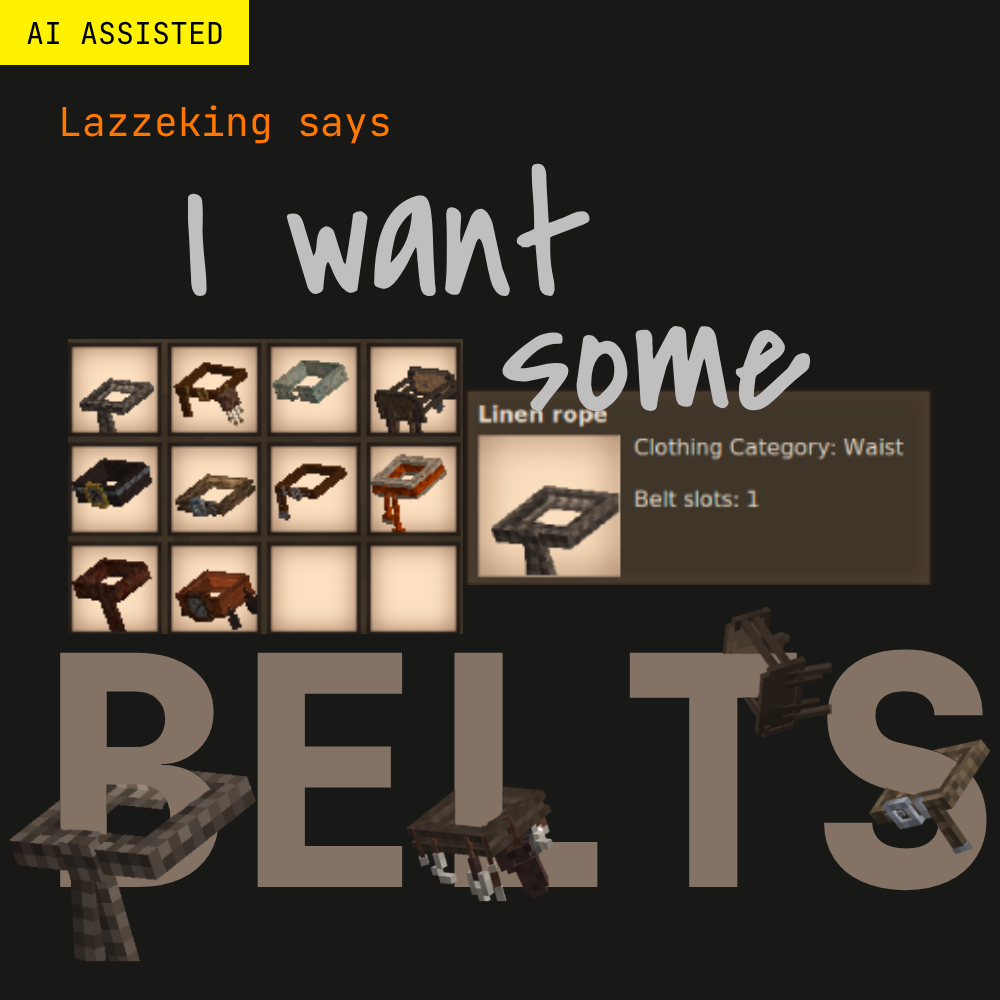
<style>
.page{position:relative;width:1000px;height:1000px;background:#181817}
.page>*{position:absolute;margin:0}
.t1{font:30px "JetBrainsMonoRoman-Regular";color:#000000}
.t2{font:39.7px "JetBrainsMonoRoman-Regular";color:#ff7700}
.t3{font:179.1px "CoveredByYourGrace";color:#bfbfbf}
.t4{font:321px "JetBrainsMonoRoman-ExtraBold";color:#847364}
</style>
<div class="page">
<p class="t1" style="left:27px;top:21px;width:195px;height:24px">AI ASSISTED</p>
<p class="t2" style="left:62px;top:105px;width:327px;height:39px">Lazzeking says</p>
<p class="t3" style="left:188px;top:163px;width:402px;height:134px">I want</p>
<p class="t3" style="left:502px;top:325px;width:309px;height:87px">some</p>
<p class="t4" style="left:60px;top:649px;width:927px;height:242px">BELTS</p>
</div>
